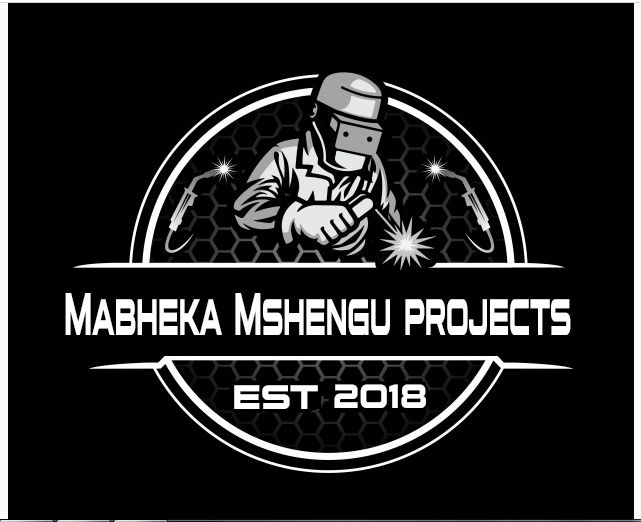
<style>
.page{position:relative;width:641px;height:522px;background:#000000}
.page>*{position:absolute;margin:0}
.t1{font:60px "FutureTense-Regular";color:#fefefe;scale:0.4 1}
.t2{font:39.6px "FutureTense-Regular";color:#fefefe;scale:0.85 1}
.t3{font:25.1px "FutureTense-Regular";color:#fefefe;scale:0.83 1}
</style>
<div class="page">
<p class="t1" style="left:65px;top:293px;width:506px;height:42px">Mabheka Mshengu projects</p>
<p class="t2" style="left:234px;top:385px;width:84px;height:24px">est</p>
<p class="t3" style="left:334px;top:384px;width:92px;height:24px">2018</p>
</div>
